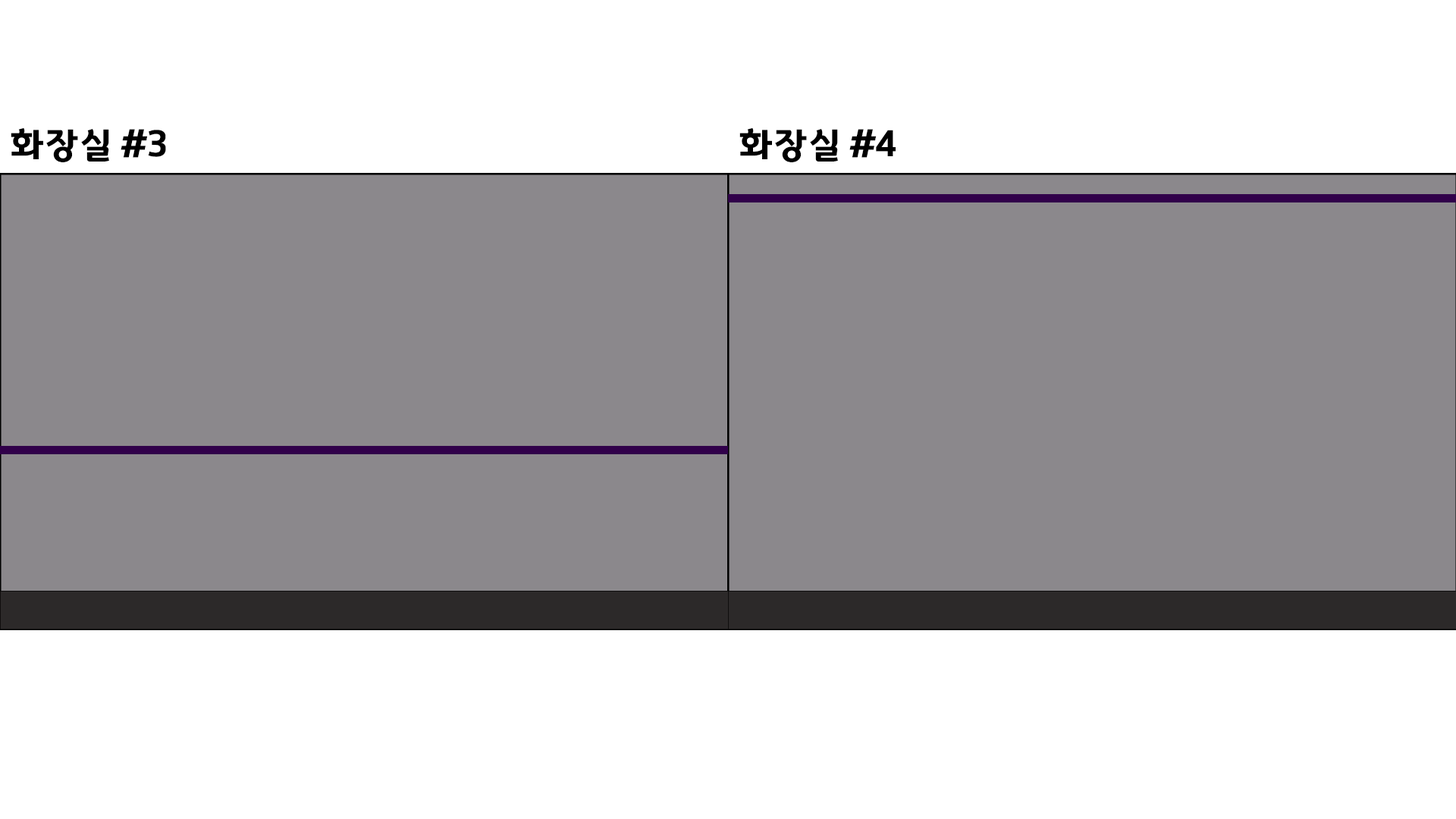
<style>
.page{position:relative;width:1456px;height:819px;background:#8b888c}
.page>*{position:absolute;margin:0}
.t1{font:36.4px "GyeonggiTitleV";letter-spacing:-0.05em;color:#000000}
</style>
<div class="page">
<p class="t1" style="left:11px;top:127px;width:155px;height:35px">화장실 #3</p>
<p class="t1" style="left:739px;top:127px;width:157px;height:35px">화장실 #4</p>
</div>
